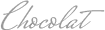
<style>
.page{position:relative;width:105px;height:30px;background:#ffffff}
.page>*{position:absolute;margin:0}
.t1{font:38.9px "MrsSaintDelafield-Regular";color:#999999}
</style>
<div class="page">
<p class="t1" style="left:0px;top:0px;width:105px;height:31px">Chocolat</p>
</div>
